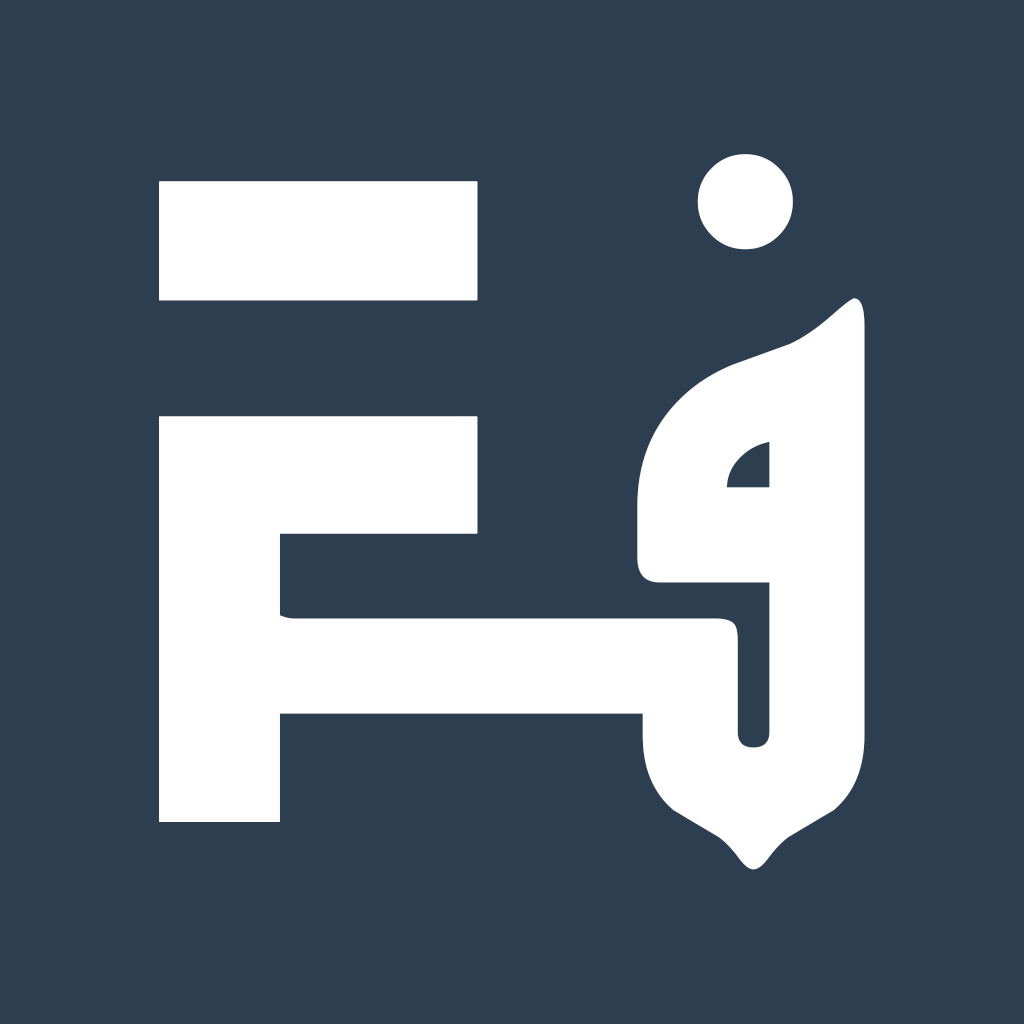
<style>
.page{position:relative;width:1024px;height:1024px;background:#2c3e50}
.page>*{position:absolute;margin:0}
.t1{font:916.7px "DiwanKufi";color:#ffffff}
.t2{font:916.7px "ProcrastinatingPixie";color:#ffffff}
</style>
<div class="page">
<p class="t1" style="left:167px;top:154px;width:698px;height:716px">ف</p>
<p class="t2" style="left:159px;top:181px;width:319px;height:641px">F</p>
</div>
